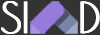
<style>
.page{position:relative;width:100px;height:35px;background:#333333}
.page>*{position:absolute;margin:0}
.t1{font:42px "PoiretOne-Regular";color:#ffffff}
</style>
<div class="page">
<p class="t1" style="left:1px;top:1px;width:26px;height:33px">SI</p>
<p class="t1" style="left:1px;top:1px;width:25px;height:33px">SI</p>
<p class="t1" style="left:2px;top:1px;width:25px;height:33px">SI</p>
<p class="t1" style="left:3px;top:1px;width:25px;height:33px">SI</p>
<p class="t1" style="left:80px;top:1px;width:18px;height:33px">D</p>
<p class="t1" style="left:81px;top:1px;width:18px;height:33px">D</p>
<p class="t1" style="left:81px;top:1px;width:18px;height:33px">D</p>
<p class="t1" style="left:82px;top:1px;width:18px;height:33px">D</p>
</div>
